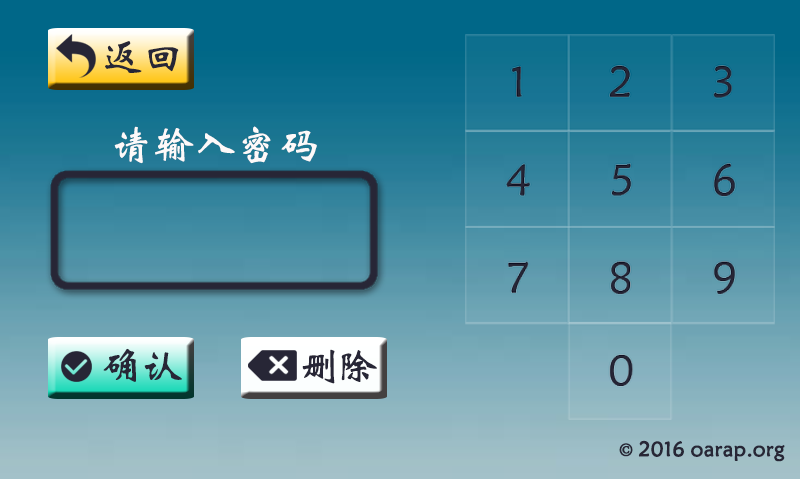
<style>
.page{position:relative;width:800px;height:480px}
.page>*{position:absolute;margin:0}
.t1{font:41.7px "STXinwei";color:#272636}
.t2{font:41.7px "STXinwei";color:#fdf9f9}
.t3{font:41.7px "STXinwei";letter-spacing:-0.14em;color:#272636}
.t4{font:20.8px "STXinwei";color:#272636;font-weight:bold}
.t5{font:20.8px "AdobeSongStd-Light";color:#272636;font-weight:bold}
</style>
<div class="page">
<p class="t1" style="left:105px;top:41px;width:74px;height:32px">返回</p>
<p class="t2" style="left:114px;top:126px;width:203px;height:38px">请输入密码</p>
<p class="t1" style="left:103px;top:348px;width:79px;height:34px">确认</p>
<p class="t3" style="left:302px;top:349px;width:75px;height:35px">删除</p>
<p class="t4" style="left:619px;top:440px;width:166px;height:22px"><span class="t5">© </span>2016 oarap.org</p>
</div>
